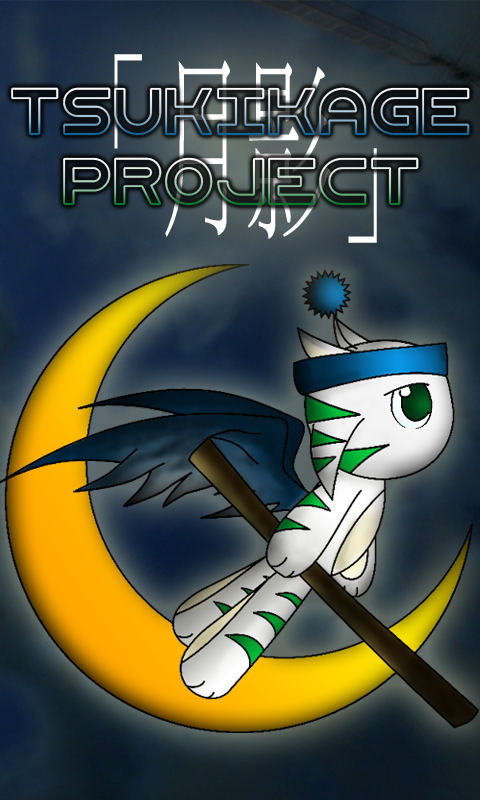
<style>
.page{position:relative;width:480px;height:800px}
.page>*{position:absolute;margin:0}
.t1{font:194.2px "MingLiU";scale:0.45 1}
.t2{font:63.2px "DouarOutline"}
</style>
<div class="page">
<p class="t1" style="left:114px;top:54px;width:263px;height:189px">「月影」</p>
<p class="t2" style="left:11px;top:87px;width:459px;height:49px">Tsukikage</p>
<p class="t2" style="left:63px;top:157px;width:356px;height:49px">Project</p>
</div>
